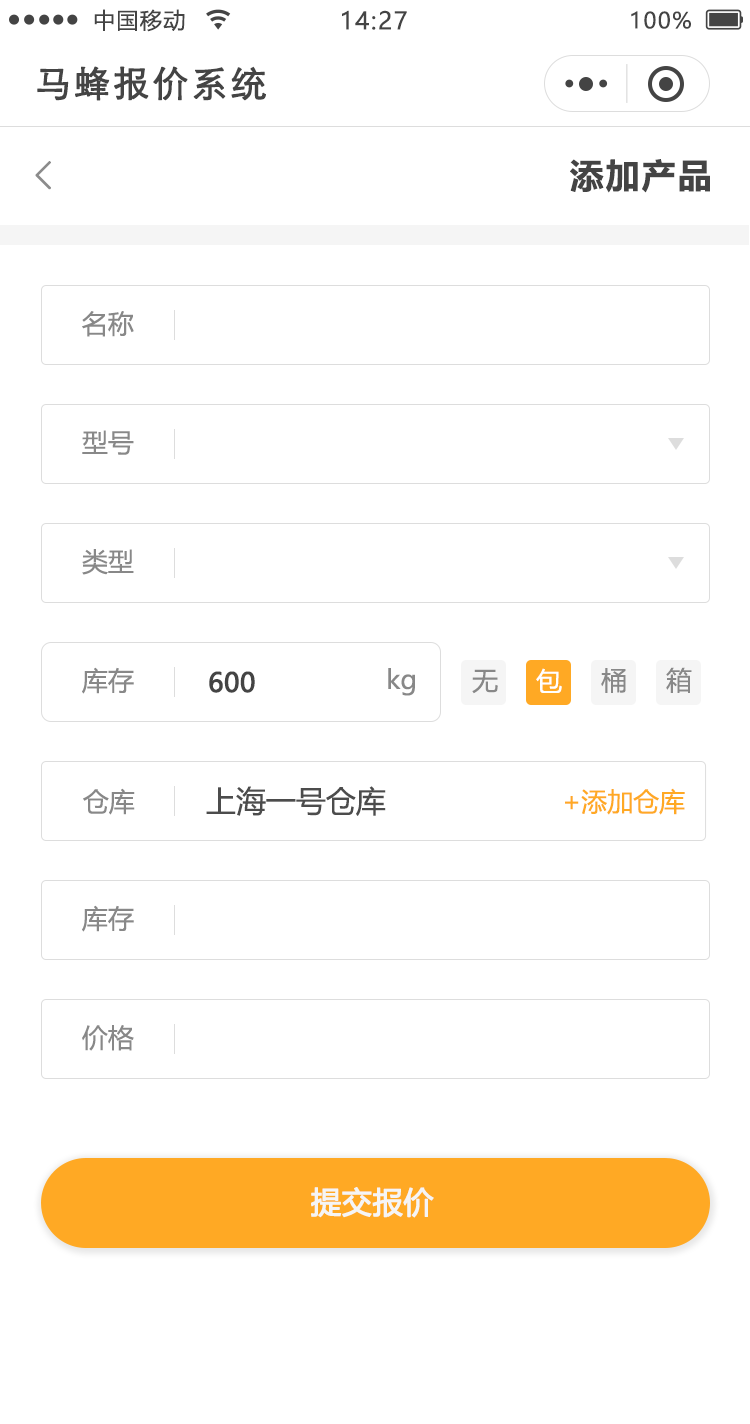
<style>
.page{position:relative;width:750px;height:1424px;background:#ffffff}
.page>*{position:absolute;margin:0}
.t1{font:22px "MicrosoftYaHei";letter-spacing:0.06em;color:#444444}
.t2{font:24px "MicrosoftYaHei";letter-spacing:0.06em;color:#444444}
.t3{font:36px "STXihei";letter-spacing:0.06em;color:#444444;font-weight:bold}
.t4{font:39.2px "FangSong";letter-spacing:0.1em;color:#8c8c8c;font-weight:bold}
.t5{font:34px "MicrosoftYaHeiUI-Bold";letter-spacing:0.06em;color:#444444}
.t6{font:26px "MicrosoftYaHeiUI";color:#888888}
.t7{font:26px "MicrosoftYaHeiUI";color:#444444;font-weight:bold}
.t8{font:26px "MicrosoftYaHeiUI";color:#ffffff}
.t9{font:30px "MicrosoftYaHeiUI";color:#4c4c4c}
.t10{font:26px "MicrosoftYaHeiUI";color:#ffa924}
.t11{font:30px "MicrosoftYaHeiUI";color:#f5f5f5;font-weight:bold}
</style>
<div class="page">
<p class="t1" style="left:94px;top:9px;width:91px;height:23px">中国移动</p>
<p class="t2" style="left:342px;top:10px;width:65px;height:20px">14:27</p>
<p class="t1" style="left:631px;top:11px;width:60px;height:18px">100%</p>
<p class="t3" style="left:37px;top:66px;width:229px;height:35px">马蜂报价系统</p>
<p class="t4" style="left:35px;top:161px;width:16px;height:29px">&lt;</p>
<p class="t5" style="left:570px;top:159px;width:140px;height:34px">添加产品</p>
<p class="t6" style="left:82px;top:311px;width:52px;height:26px">名称</p>
<p class="t6" style="left:82px;top:430px;width:52px;height:25px">型号</p>
<p class="t6" style="left:82px;top:549px;width:52px;height:26px">类型</p>
<p class="t6" style="left:82px;top:667px;width:52px;height:27px">库存</p>
<p class="t7" style="left:209px;top:671px;width:46px;height:22px">600</p>
<p class="t6" style="left:388px;top:668px;width:27px;height:28px">kg</p>
<p class="t6" style="left:472px;top:669px;width:26px;height:25px">无</p>
<p class="t8" style="left:536px;top:668px;width:26px;height:25px">包</p>
<p class="t6" style="left:601px;top:668px;width:25px;height:25px">桶</p>
<p class="t6" style="left:666px;top:667px;width:26px;height:26px">箱</p>
<p class="t6" style="left:83px;top:788px;width:52px;height:27px">仓库</p>
<p class="t9" style="left:206px;top:786px;width:180px;height:30px">上海一号仓库</p>
<p class="t10" style="left:565px;top:788px;width:120px;height:27px">+添加仓库</p>
<p class="t6" style="left:82px;top:905px;width:52px;height:27px">库存</p>
<p class="t6" style="left:82px;top:1025px;width:52px;height:26px">价格</p>
<p class="t11" style="left:311px;top:1187px;width:123px;height:31px">提交报价</p>
</div>
